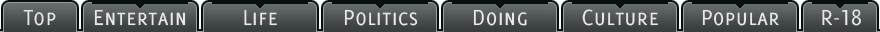
<style>
.page{position:relative;width:880px;height:32px}
.page>*{position:absolute;margin:0}
.t1{font:24px "Delicious-SmallCaps";color:#e8e8e8}
</style>
<div class="page">
<p class="t1" style="left:23px;top:9px;width:33px;height:17px">Top</p>
<p class="t1" style="left:23px;top:9px;width:33px;height:17px">Top</p>
<p class="t1" style="left:94px;top:9px;width:92px;height:17px">Entertain</p>
<p class="t1" style="left:94px;top:9px;width:92px;height:17px">Entertain</p>
<p class="t1" style="left:244px;top:9px;width:33px;height:17px">Life</p>
<p class="t1" style="left:244px;top:9px;width:33px;height:17px">Life</p>
<p class="t1" style="left:344px;top:9px;width:74px;height:17px">Politics</p>
<p class="t1" style="left:344px;top:9px;width:74px;height:17px">Politics</p>
<p class="t1" style="left:473px;top:9px;width:54px;height:17px">Doing</p>
<p class="t1" style="left:473px;top:9px;width:54px;height:17px">Doing</p>
<p class="t1" style="left:582px;top:9px;width:76px;height:17px">Culture</p>
<p class="t1" style="left:582px;top:9px;width:76px;height:17px">Culture</p>
<p class="t1" style="left:702px;top:9px;width:77px;height:17px">Popular</p>
<p class="t1" style="left:702px;top:9px;width:77px;height:17px">Popular</p>
<p class="t1" style="left:822px;top:9px;width:39px;height:17px">R-18</p>
<p class="t1" style="left:822px;top:9px;width:39px;height:17px">R-18</p>
</div>
